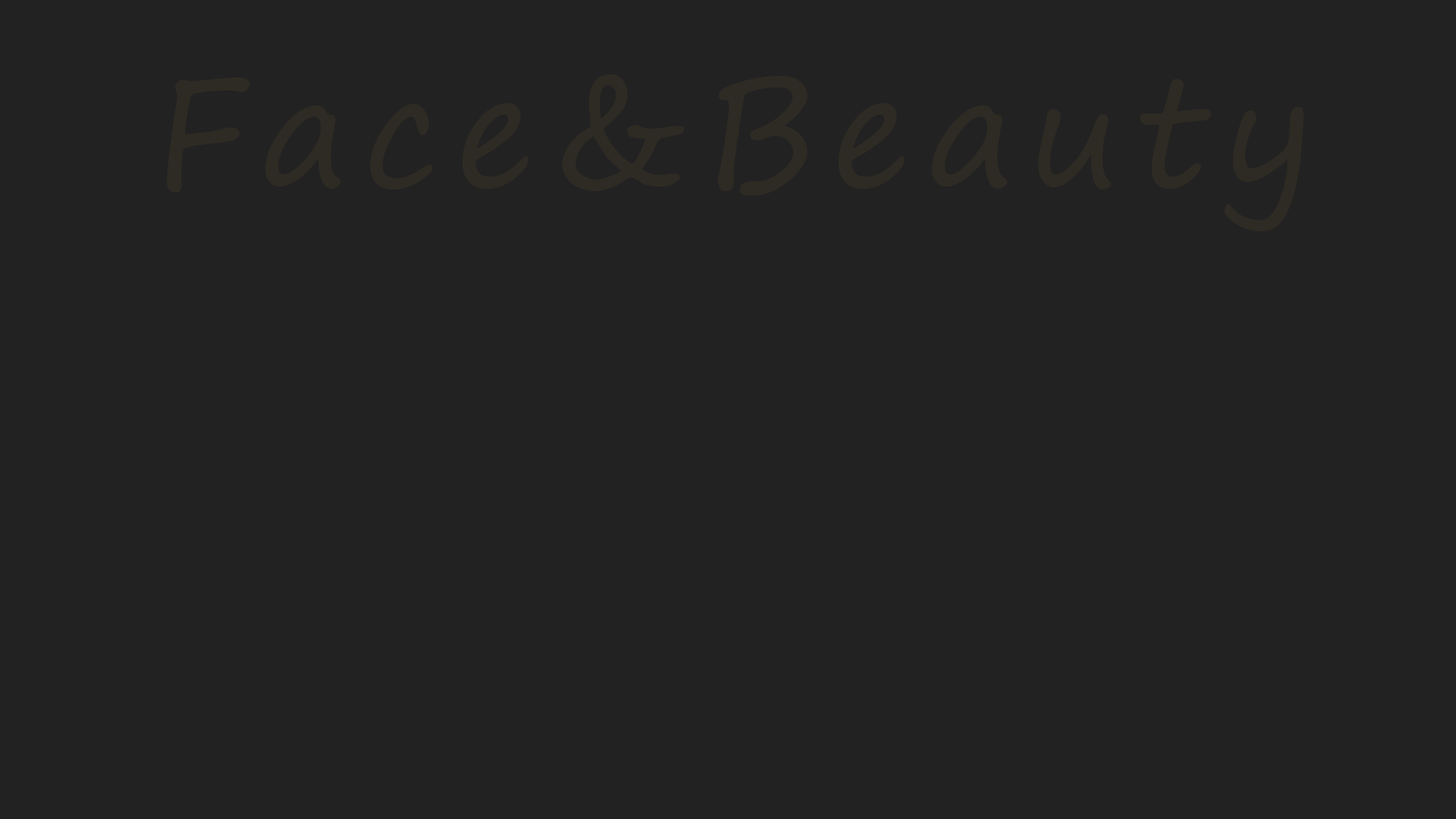
<style>
.page{position:relative;width:1456px;height:819px;background:#222222}
.page>*{position:absolute;margin:0}
.t1{font:151.7px "SegoePrint";letter-spacing:0.1em;color:#2e2b24}
</style>
<div class="page">
<p class="t1" style="left:167px;top:74px;width:1137px;height:157px">Face&amp;Beauty</p>
</div>
